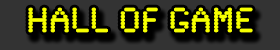
<style>
.page{position:relative;width:280px;height:50px;background:#333333}
.page>*{position:absolute;margin:0}
.t1{font:36px "SynchroLET";color:#f6ff00}
</style>
<div class="page">
<p class="t1" style="left:28px;top:7px;width:225px;height:26px">HALL OF GAME</p>
</div>
